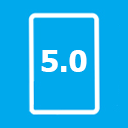
<style>
.page{position:relative;width:128px;height:128px;background:#00a9ec}
.page>*{position:absolute;margin:0}
.t1{font:30px "Tahoma-Bold";color:#ffffff}
</style>
<div class="page">
<p class="t1" style="left:41px;top:50px;width:46px;height:22px">5.0</p>
</div>
